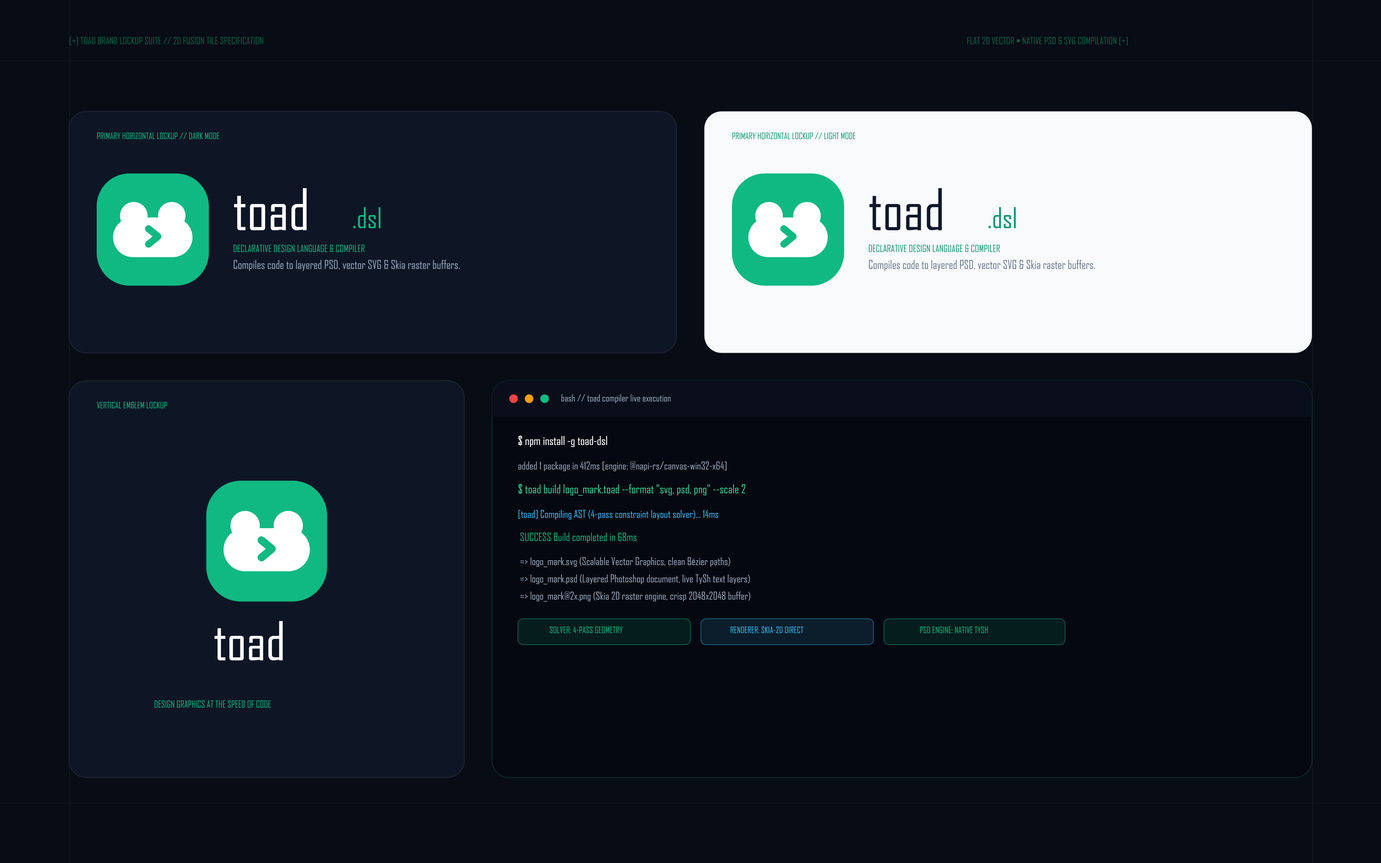
<style>
.page{position:relative;width:1381px;height:863px;background:#080c14}
.page>*{position:absolute;margin:0}
.t1{font:9.5px "Consolas-Bold";letter-spacing:0.136em}
.t2{font:8.6px "Consolas-Bold";letter-spacing:0.15em;color:#10b981}
.t3{font:8.6px "Consolas-Bold";letter-spacing:0.15em;color:#059669}
.t4{font:55.3px "SegoeUI-Bold";letter-spacing:-0.031em;color:#ffffff}
.t5{font:55.3px "SegoeUI-Bold";letter-spacing:-0.031em;color:#0f172a}
.t6{font:27.6px "Consolas-Bold";color:#10b981}
.t7{font:27.6px "Consolas-Bold";color:#059669}
.t8{font:9.5px "Consolas-Bold";letter-spacing:0.164em;color:#10b981}
.t9{font:9.5px "Consolas-Bold";letter-spacing:0.164em;color:#059669}
.t10{font:11.2px "SegoeUI";color:#94a3b8}
.t11{font:11.2px "SegoeUI";color:#64748b}
.t12{font:9.5px "Consolas-Bold";color:#94a3b8}
.t13{font:11.7px "Consolas-Bold";color:#ffffff}
.t14{font:10.4px "Consolas";color:#94a3b8}
.t15{font:11.7px "Consolas-Bold";color:#34d399}
.t16{font:10.4px "Consolas";color:#38bdf8}
.t17{font:10.8px "Consolas-Bold";color:#10b981}
.t18{font:51.8px "SegoeUI-Bold";letter-spacing:-0.033em;color:#ffffff}
.t19{font:8.6px "Consolas-Bold"}
.t20{font:8.6px "Consolas-Bold";color:#38bdf8}
.t21{font:8.6px "Consolas-Bold";color:#10b981}
.t22{font:9.1px "Consolas-Bold";letter-spacing:0.143em;color:#10b981}
</style>
<div class="page">
<p class="t1" style="left:69px;top:36px;width:383px;height:12px">[+] TOAD BRAND LOCKUP SUITE // 2D FUSION TILE SPECIFICATION</p>
<p class="t1" style="left:967px;top:36px;width:319px;height:12px">FLAT 2D VECTOR • NATIVE PSD &amp; SVG COMPILATION [+]</p>
<p class="t2" style="left:97px;top:132px;width:229px;height:12px">PRIMARY HORIZONTAL LOCKUP // DARK MODE</p>
<p class="t3" style="left:732px;top:132px;width:235px;height:12px">PRIMARY HORIZONTAL LOCKUP // LIGHT MODE</p>
<p class="t4" style="left:233px;top:186px;width:114px;height:69px">toad</p>
<p class="t5" style="left:868px;top:186px;width:114px;height:69px">toad</p>
<p class="t6" style="left:352px;top:206px;width:62px;height:35px">.dsl</p>
<p class="t7" style="left:988px;top:206px;width:61px;height:35px">.dsl</p>
<p class="t8" style="left:233px;top:244px;width:257px;height:13px">DECLARATIVE DESIGN LANGUAGE &amp; COMPILER</p>
<p class="t9" style="left:868px;top:244px;width:257px;height:13px">DECLARATIVE DESIGN LANGUAGE &amp; COMPILER</p>
<p class="t10" style="left:233px;top:260px;width:315px;height:14px">Compiles code to layered PSD, vector SVG &amp; Skia raster buffers.</p>
<p class="t11" style="left:868px;top:260px;width:316px;height:14px">Compiles code to layered PSD, vector SVG &amp; Skia raster buffers.</p>
<p class="t2" style="left:97px;top:402px;width:132px;height:11px">VERTICAL EMBLEM LOCKUP</p>
<p class="t12" style="left:561px;top:394px;width:188px;height:12px">bash // toad compiler live execution</p>
<p class="t13" style="left:518px;top:436px;width:161px;height:15px">$ npm install -g toad-dsl</p>
<p class="t14" style="left:518px;top:461px;width:342px;height:13px">added 1 package in 412ms [engine: @napi-rs/canvas-win32-x64]</p>
<p class="t15" style="left:518px;top:484px;width:398px;height:15px">$ toad build logo_mark.toad --format "svg, psd, png" --scale 2</p>
<p class="t16" style="left:518px;top:509px;width:354px;height:13px">[toad] Compiling AST (4-pass constraint layout solver)... 14ms</p>
<p class="t17" style="left:518px;top:533px;width:196px;height:14px">SUCCESS Build completed in 68ms</p>
<p class="t14" style="left:518px;top:557px;width:760px;height:52px">=&gt; logo_mark.svg (Scalable Vector Graphics, clean Bézier paths)<br> =&gt; logo_mark.psd (Layered Photoshop document, live TySh text layers)<br> =&gt; logo_mark@2x.png (Skia 2D raster engine, crisp 2048x2048 buffer)</p>
<p class="t18" style="left:214px;top:619px;width:106px;height:65px">toad</p>
<p class="t19" style="left:549px;top:626px;width:110px;height:12px">SOLVER: 4-PASS GEOMETRY</p>
<p class="t20" style="left:730px;top:626px;width:114px;height:12px">RENDERER: SKIA-2D DIRECT</p>
<p class="t21" style="left:920px;top:626px;width:110px;height:12px">PSD ENGINE: NATIVE TYSH</p>
<p class="t22" style="left:154px;top:701px;width:226px;height:11px">DESIGN GRAPHICS AT THE SPEED OF CODE</p>
</div>
